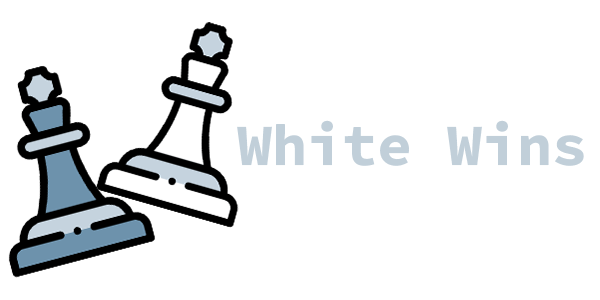
<style>
.page{position:relative;width:600px;height:300px;background:#ffffff}
.page>*{position:absolute;margin:0}
.t1{font:58.3px "SourceCodePro-Bold";color:#c1cfd9}
</style>
<div class="page">
<p class="t1" style="left:237px;top:120px;width:347px;height:46px">White Wins</p>
</div>
